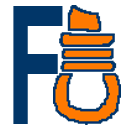
<style>
.page{position:relative;width:128px;height:128px;background:#ffffff}
.page>*{position:absolute;margin:0}
.t1{font:164.4px "Arial-BoldMT";letter-spacing:0.02em;color:#013668;scale:0.61 1}
</style>
<div class="page">
<p class="t1" style="left:13px;top:6px;width:50px;height:118px">F</p>
</div>
